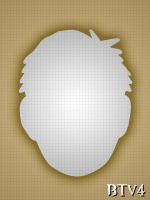
<style>
.page{position:relative;width:150px;height:200px}
.page>*{position:absolute;margin:0}
.t1{font:16px "GWTwoFontVersion1.1";color:#e9e9e9}
</style>
<div class="page">
<p class="t1" style="left:107px;top:184px;width:38px;height:12px">BTv4</p>
</div>
